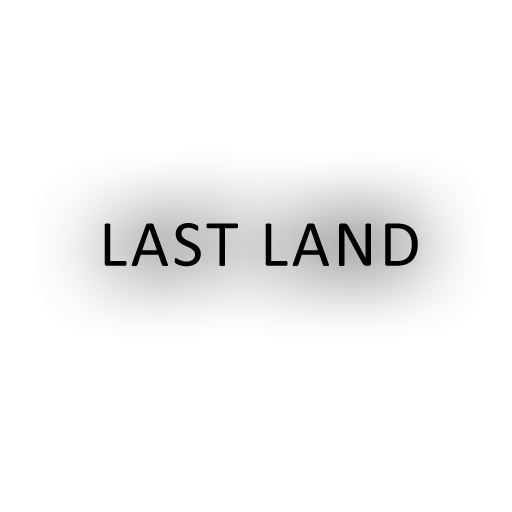
<style>
.page{position:relative;width:512px;height:512px;background:#ffffff}
.page>*{position:absolute;margin:0}
.t1{font:66.7px "Calibri";letter-spacing:0.05em;color:#000000}
</style>
<div class="page">
<p class="t1" style="left:104px;top:223px;width:314px;height:44px">LAST LAND</p>
</div>
